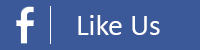
<style>
.page{position:relative;width:200px;height:50px;background:#3b5998}
.page>*{position:absolute;margin:0}
.t1{font:30px "Calibri";color:#ffffff}
</style>
<div class="page">
<p class="t1" style="left:78px;top:15px;width:82px;height:20px">Like Us</p>
</div>
